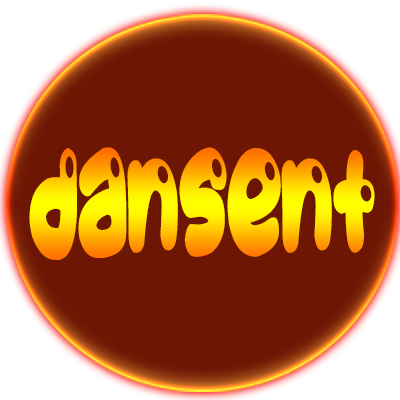
<style>
.page{position:relative;width:400px;height:400px;background:#6d1603}
.page>*{position:absolute;margin:0}
.t1{font:114px "JuicyFruity";scale:0.51 1}
</style>
<div class="page">
<p class="t1" style="left:29px;top:147px;width:346px;height:113px">dansent</p>
</div>
